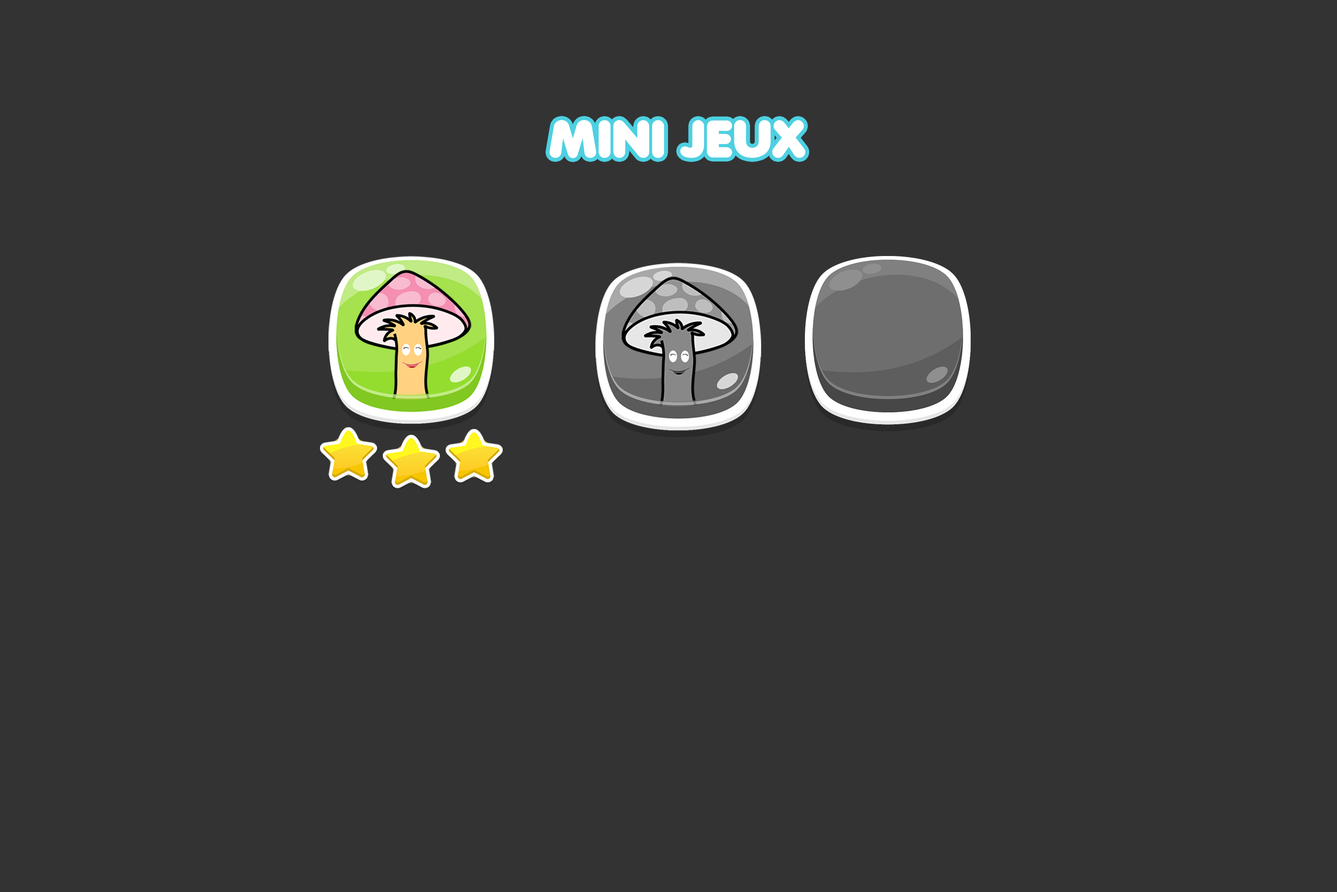
<style>
.page{position:relative;width:1337px;height:892px;background:#333333}
.page>*{position:absolute;margin:0}
.t1{font:51.3px "Debussy";color:#ffffff;text-transform:uppercase}
</style>
<div class="page">
<p class="t1" style="left:550px;top:120px;width:256px;height:38px">MINI JEUX</p>
</div>
